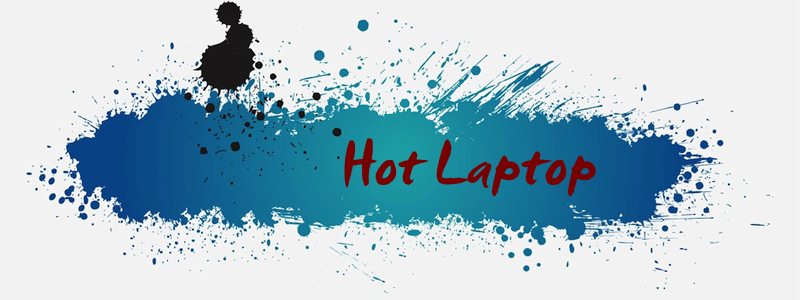
<style>
.page{position:relative;width:800px;height:300px;background:#f2f2f2}
.page>*{position:absolute;margin:0}
.t1{font:60.5px "SmudgerLetPlain";color:#770000}
</style>
<div class="page">
<p class="t1" style="left:344px;top:138px;width:252px;height:59px">Hot Laptop</p>
</div>
